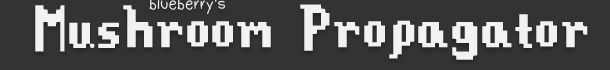
<style>
.page{position:relative;width:610px;height:70px;background:#333333}
.page>*{position:absolute;margin:0}
.t1{font:72px "Stardew-Valley";color:#f2f2f2}
</style>
<div class="page">
<p class="t1" style="left:35px;top:4px;width:553px;height:56px">Mushroom Propagator</p>
</div>
